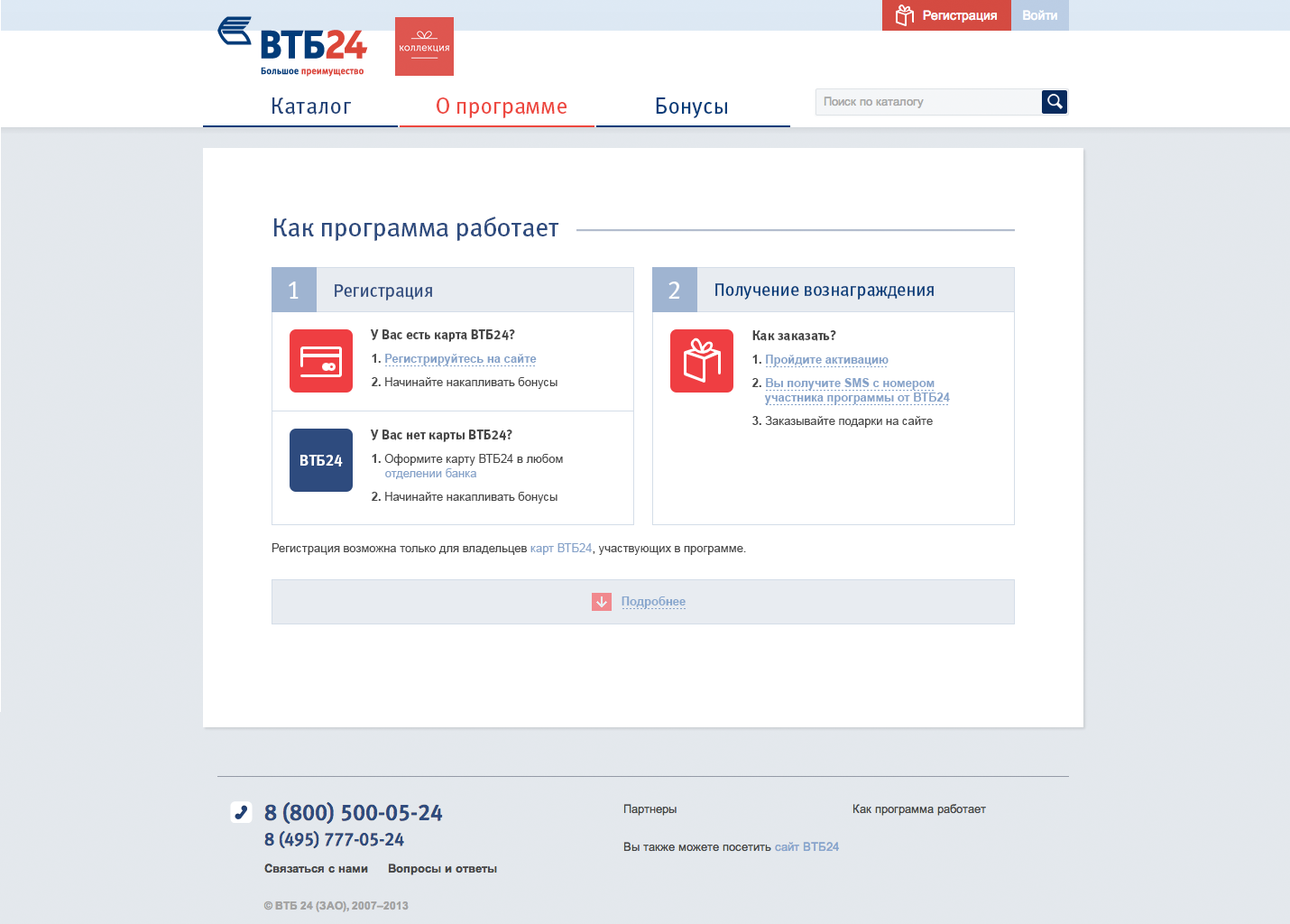
<style>
.page{position:relative;width:1290px;height:924px;background:#ffffff}
.page>*{position:absolute;margin:0}
.t1{font:22.6px "MetaBookCyrLF-Roman";letter-spacing:0.005em;color:#ed473f}
.t2{font:22.6px "MetaBookCyrLF-Roman";letter-spacing:0.005em;color:#023c79}
.t3{font:26.2px "MetaBookCyrLF-Roman";color:#2e4b7e}
.t4{font:25.3px "MetaBookCyrLF-Roman";color:#ffffff}
.t5{font:18px "MetaBookCyrLF-Roman";color:#2e4b7e}
.t6{font:18px "MetaBookCyrLF-Roman";color:#033c7a}
.t7{font:11.7px/23.5px "ArialMT";color:#474747}
.t8{font:13.5px/23.5px "MetaBoldCyrLF-Roman";color:#474747}
.t9{font:11.7px/23.5px "Arial-BoldMT";color:#474747}
.t10{font:11.7px/23.5px "Arial-BoldMT";color:#85a2c9}
.t11{font:11.7px/14.4px "Arial-BoldMT";color:#85a2c9}
.t12{font:11.7px "ArialMT";color:#474747}
.t13{font:11.7px "ArialMT";color:#85a2c9}
.t14{font:11.7px "Arial-BoldMT";color:#87a6cd}
</style>
<div class="page">
<p class="t1" style="left:437px;top:97px;width:130px;height:21px">О программе</p>
<p class="t2" style="left:656px;top:97px;width:71px;height:21px">Бонусы</p>
<p class="t3" style="left:274px;top:217px;width:285px;height:24px">Как программа работает</p>
<p class="t4" style="left:289px;top:282px;width:10px;height:17px">1</p>
<p class="t4" style="left:669px;top:282px;width:11px;height:17px">2</p>
<p class="t5" style="left:335px;top:284px;width:97px;height:16px">Регистрация</p>
<p class="t6" style="left:716px;top:283px;width:218px;height:17px">Получение вознаграждения</p>
<p class="t7" style="left:370px;top:329px;width:188px;height:60px"><span class="t8">У Вас есть карта ВТБ24?<br></span><span class="t9">1. </span><span class="t10">Регистрируйтесь на сайте<br></span><span class="t9">2.</span> Начинайте накапливать бонусы</p>
<p class="t11" style="left:753px;top:330px;width:197px;height:98px"><span class="t8">Как заказать?<br></span><span class="t9">1. </span><span class="t10">Пройдите активацию<br></span><span class="t9">2. </span><span class="t10">В</span>ы получите SMS с номером<br>участника программы от ВТБ24<br><span class="t9">3.</span><span class="t7"> Заказывайте подарки на сайте</span></p>
<p class="t7" style="left:370px;top:430px;width:193px;height:74px"><span class="t8">У Вас нет карты ВТБ24?<br></span><span class="t9">1.</span> О<span class="t12">формите карту ВТБ24 в любом <br></span><span class="t13">отделении банка<br></span><span class="t9">2.</span> Начинайте накапливать бонусы</p>
<p class="t12" style="left:272px;top:543px;width:474px;height:12px">Регистрация возможна только для владельцев <span class="t13">карт ВТБ24</span>, участвующих в программе.</p>
<p class="t14" style="left:622px;top:596px;width:64px;height:12px">Подробнее</p>
</div>
